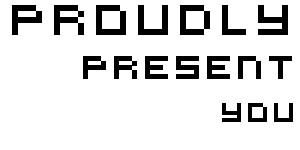
<style>
.page{position:relative;width:300px;height:150px;background:#ffffff}
.page>*{position:absolute;margin:0}
.t1{font:48px/14.5px "VirtualDJ";color:#000000}
.t2{font:36px/14.5px "VirtualDJ";color:#000000}
.t3{font:30px/14.5px "VirtualDJ";color:#000000}
</style>
<div class="page">
<p class="t1" style="left:12px;top:5px;width:281px;height:117px;text-align:right">proudly<br><br><span class="t2"><br>Present<br><br><br></span><span class="t3">you</span></p>
</div>
